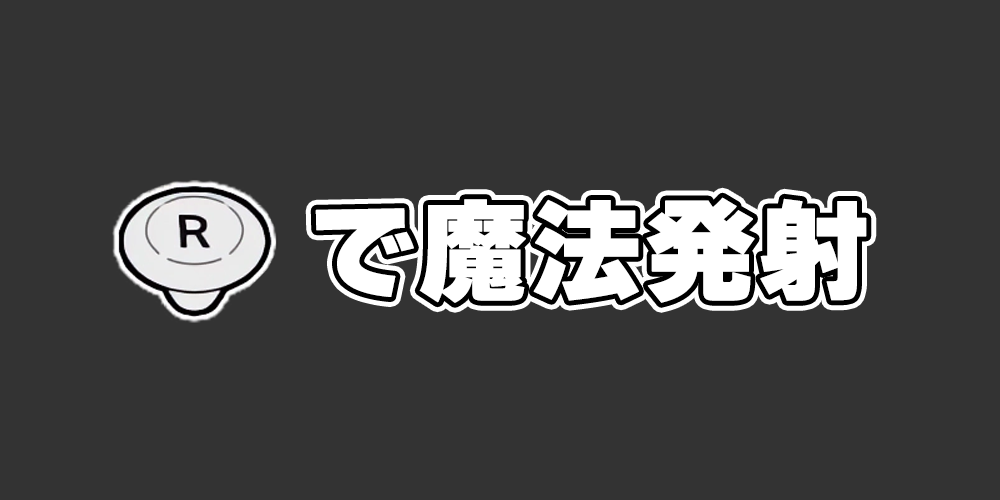
<style>
.page{position:relative;width:1000px;height:500px;background:#333333}
.page>*{position:absolute;margin:0}
.t1{font:110px "WanpakuRuika-08";color:#ffffff;font-weight:bold}
</style>
<div class="page">
<p class="t1" style="left:315px;top:197px;width:552px;height:106px">で魔法発射</p>
</div>
